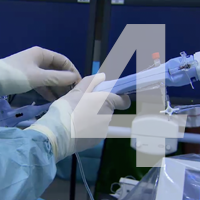
<style>
.page{position:relative;width:200px;height:200px}
.page>*{position:absolute;margin:0}
.t1{font:208.3px "PostGrotesk-Bold"}
</style>
<div class="page">
<p class="t1" style="left:70px;top:24px;width:118px;height:143px">4</p>
</div>
